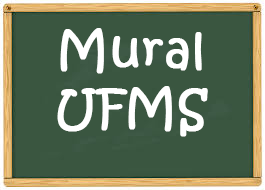
<style>
.page{position:relative;width:265px;height:190px;background:#3a5640}
.page>*{position:absolute;margin:0}
.t1{font:48px "KristenITC-Regular";color:#ffffff;font-weight:bold}
</style>
<div class="page">
<p class="t1" style="left:57px;top:28px;width:151px;height:109px;text-align:center">Mural<br>UFMS</p>
</div>
